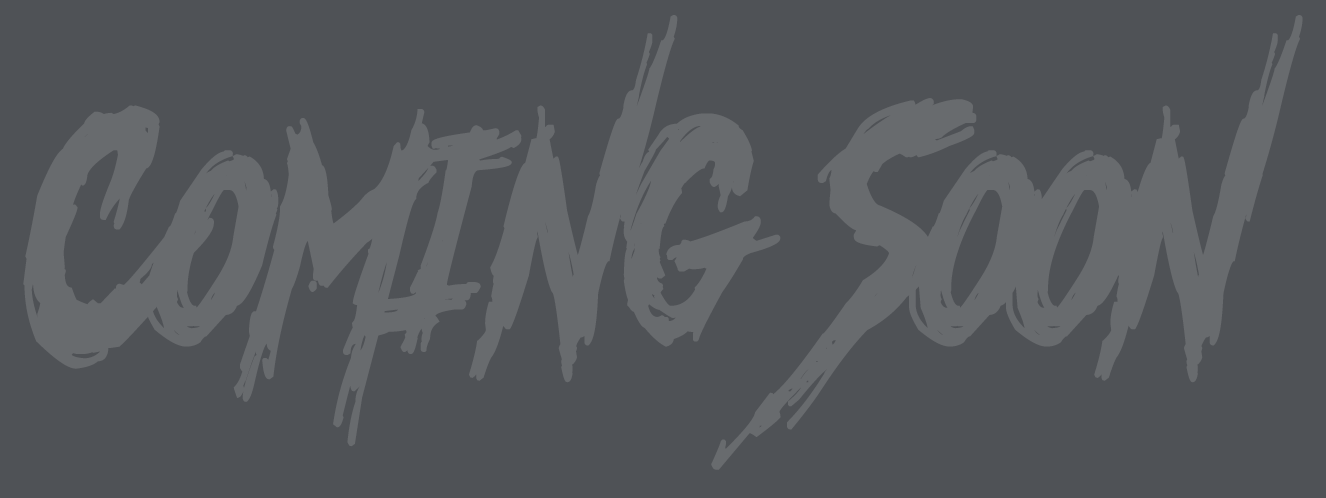
<style>
.page{position:relative;width:1326px;height:498px;background:#4f5256}
.page>*{position:absolute;margin:0}
.t1{font:452.8px "AnotherAmerica";color:#686b6e;font-weight:bold;scale:0.87 1}
</style>
<div class="page">
<p class="t1" style="left:23px;top:15px;width:1280px;height:455px">Coming Soon</p>
</div>
